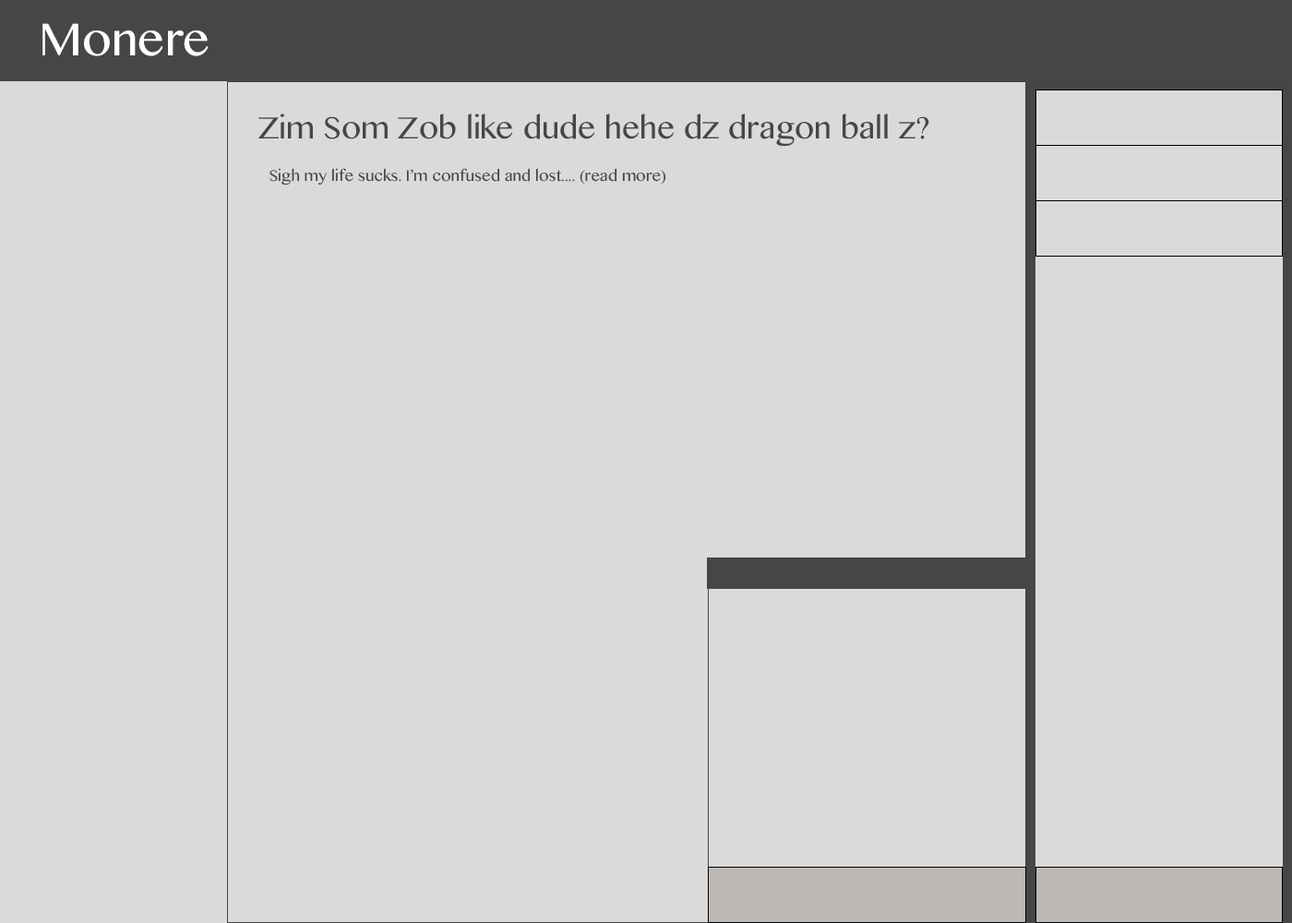
<style>
.page{position:relative;width:1292px;height:923px;background:#dcdad9}
.page>*{position:absolute;margin:0}
.t1{font:66.4px "SinhalaMN";color:#ffffff}
.t2{font:44.3px "SinhalaMN";color:#464646}
.t3{font:22.1px "SinhalaMN";color:#464646}
</style>
<div class="page">
<p class="t1" style="left:42px;top:23px;width:167px;height:33px">Monere</p>
<p class="t2" style="left:258px;top:114px;width:671px;height:33px">Zim Som Zob like dude hehe dz dragon ball z?</p>
<p class="t3" style="left:269px;top:168px;width:397px;height:18px">Sigh my life sucks. I’m confused and lost.... (read more)</p>
</div>
